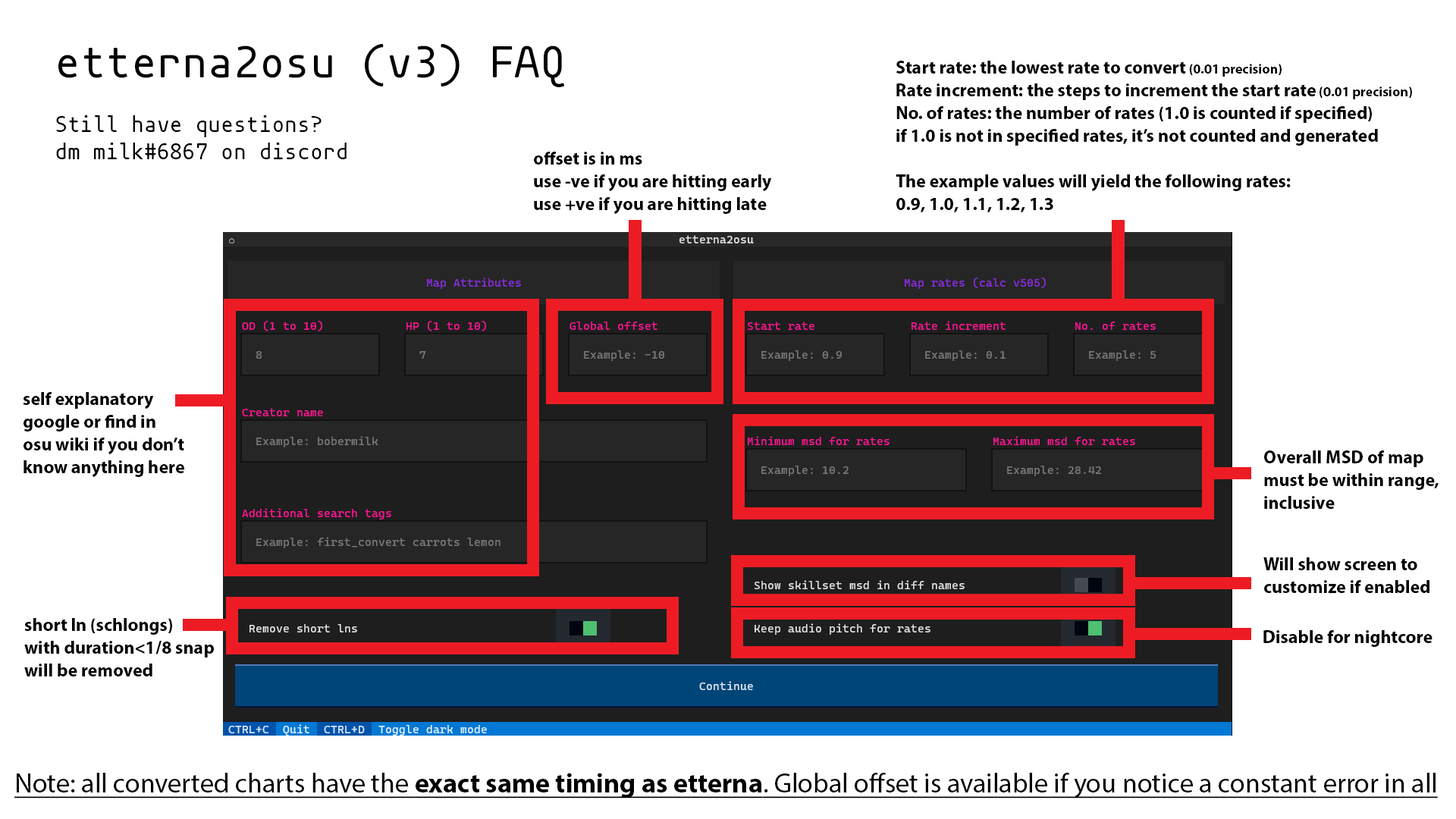
<style>
.page{position:relative;width:1456px;height:819px;background:#ffffff}
.page>*{position:absolute;margin:0}
.t1{font:22.7px/27.3px "mononoki-Regular";color:#000000}
.t2{font:45.5px/27.3px "mononoki-Regular";color:#000000}
.t3{font:18.2px/22.7px "MyriadPro-Bold";color:#000000}
.t4{font:13.6px/22.7px "MyriadPro-Bold";color:#000000}
.t5{font:18.2px "MyriadPro-Bold";color:#000000}
.t6{font:27.3px "MyriadPro-Regular";color:#000000;text-decoration:underline}
.t7{font:27.3px "MyriadPro-Bold";color:#000000;text-decoration:underline}
</style>
<div class="page">
<p class="t1" style="left:56px;top:44px;width:509px;height:115px"><span class="t2">etterna2osu (v3) FAQ<br></span><br>Still have questions? <br>dm milk#6867 on discord</p>
<p class="t3" style="left:896px;top:61px;width:516px;height:151px">Start rate: the lowest rate to convert<span class="t4"> (0.01 precision)<br></span>Rate increment: the steps to increment the start rate<span class="t4"> (0.01 precision)<br></span>No. of rates: the number of rates (1.0 is counted if specified)<br>if 1.0 is not in specified rates, it’s not counted and generated<br><br>The example values will yield the following rates:<br>0.9, 1.0, 1.1, 1.2, 1.3</p>
<p class="t3" style="left:534px;top:152px;width:238px;height:62px">offset is in ms<br>use -ve if you are hitting early<br>use +ve if you are hitting late</p>
<p class="t3" style="left:23px;top:392px;width:161px;height:85px">self explanatory<br>google or find in<br>osu wiki if you don’t<br>know anything here</p>
<p class="t3" style="left:1264px;top:450px;width:175px;height:59px">Overall MSD of map<br>must be within range,<br>inclusive</p>
<p class="t3" style="left:1263px;top:557px;width:166px;height:36px">Will show screen to <br>customize if enabled</p>
<p class="t3" style="left:24px;top:618px;width:190px;height:58px">short ln (schlongs)<br>with duration&lt;1/8 snap<br>will be removed</p>
<p class="t5" style="left:1263px;top:630px;width:169px;height:17px">Disable for nightcore</p>
<p class="t6" style="left:14px;top:773px;width:1424px;height:26px">Note: all converted charts have the <span class="t7">exact same timing as etterna</span>. Global offset is available if you notice a constant error in all</p>
</div>
